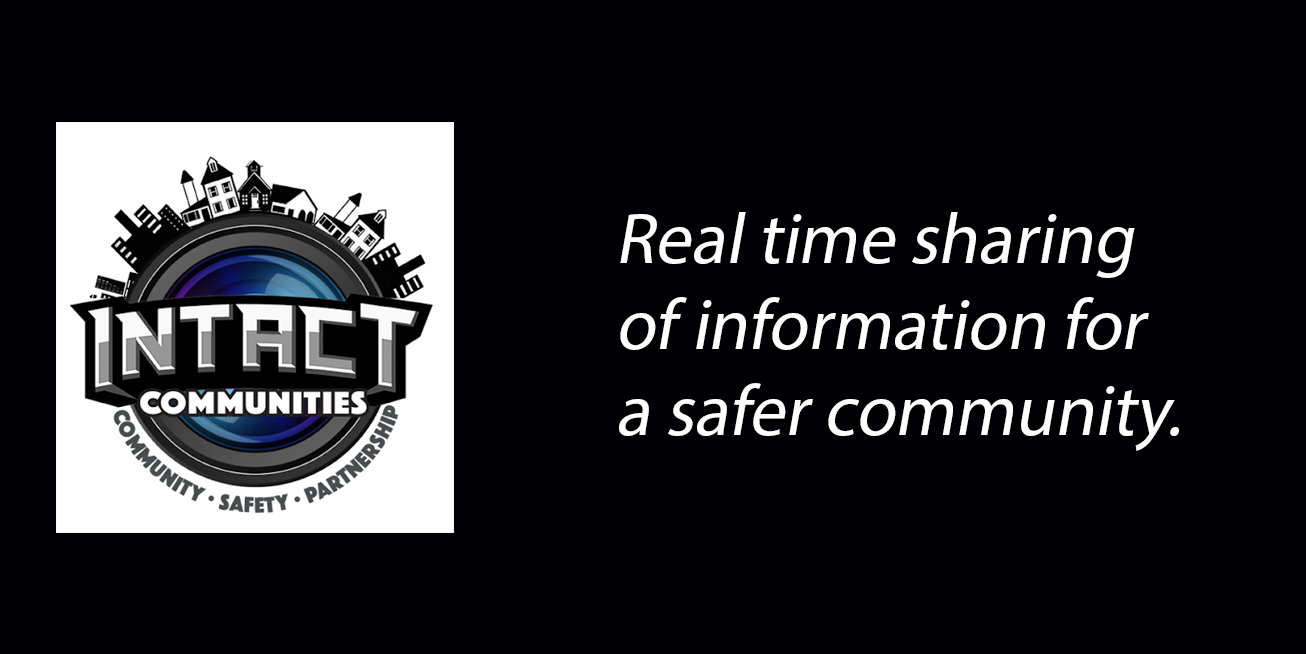
<style>
.page{position:relative;width:1306px;height:654px;background:#000002}
.page>*{position:absolute;margin:0}
.t1{font:72px "MyriadPro-Regular";color:#fefefe;font-style:italic}
</style>
<div class="page">
<p class="t1" style="left:619px;top:212px;width:560px;height:239px">Real time sharing <br>of information for <br>a safer community.</p>
</div>
